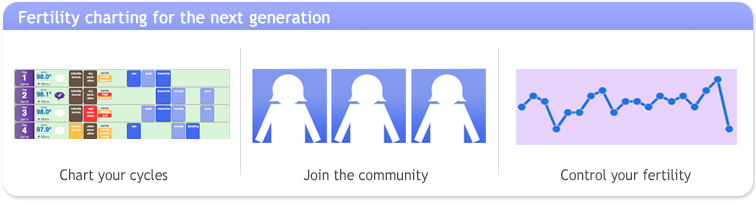
<style>
.page{position:relative;width:756px;height:205px;background:#ffffff}
.page>*{position:absolute;margin:0}
.t1{font:16.8px "TrebuchetMS";color:#ffffff;font-weight:bold;scale:0.95 1}
.t2{font:14.7px "TrebuchetMS";color:#4c4c4c;scale:0.95 1}
</style>
<div class="page">
<p class="t1" style="left:19px;top:10px;width:311px;height:17px">Fertility charting for the next generation</p>
<p class="t2" style="left:60px;top:169px;width:108px;height:14px">Chart your cycles</p>
<p class="t2" style="left:303px;top:169px;width:126px;height:14px">Join the community</p>
<p class="t2" style="left:561px;top:169px;width:130px;height:14px">Control your fertility</p>
</div>
